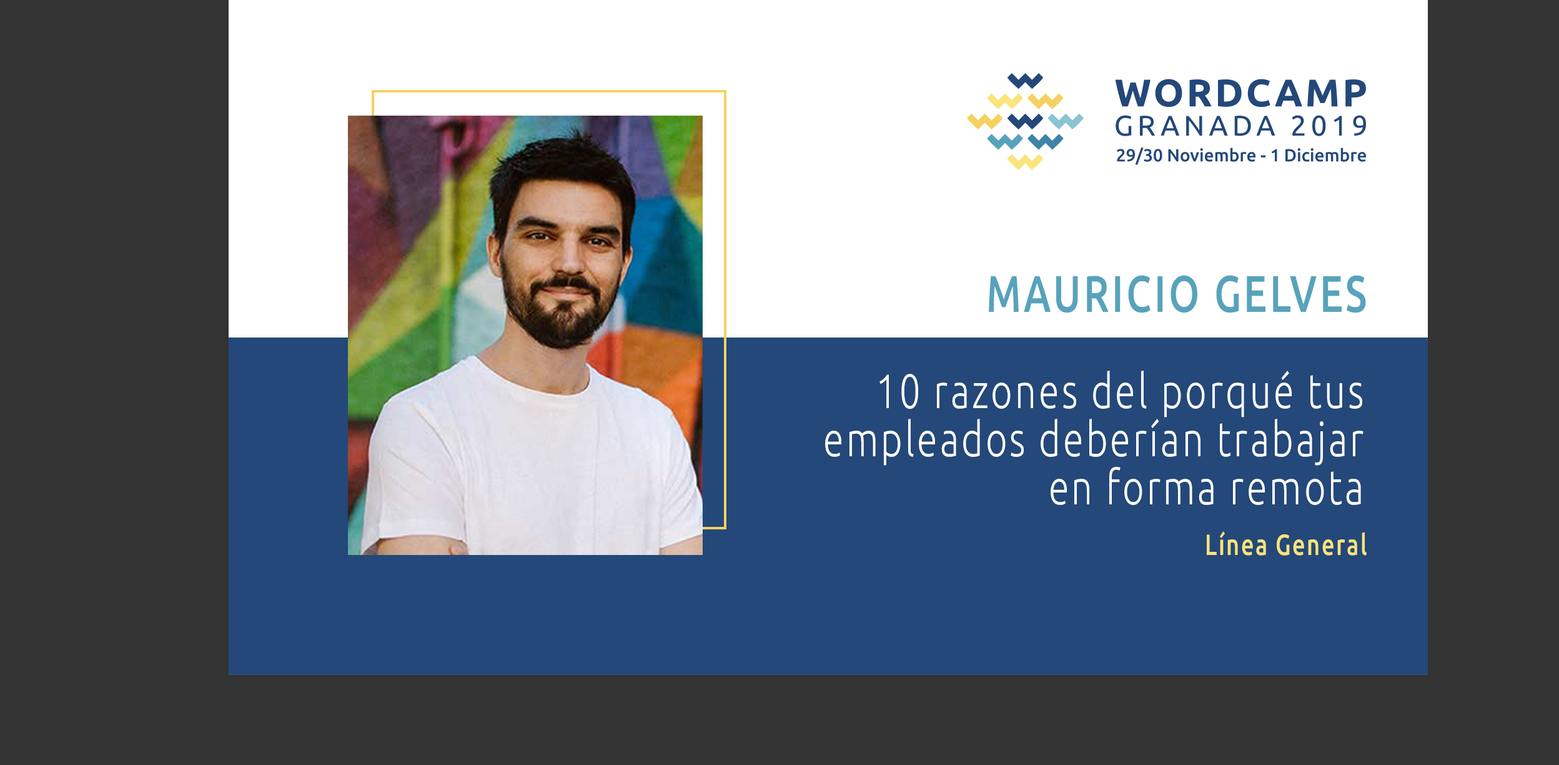
<style>
.page{position:relative;width:1559px;height:765px;background:#333333}
.page>*{position:absolute;margin:0}
.t1{font:51.4px "Ubuntu-Medium";letter-spacing:0.068em;color:#57a3bb;text-transform:uppercase;scale:0.77 1}
.t2{font:48.2px/48.2px "Ubuntu-Light";letter-spacing:0.068em;color:#ffffff;scale:0.77 1}
.t3{font:29.2px "Ubuntu-Medium";letter-spacing:0.068em;color:#f9e37b;scale:0.77 1}
</style>
<div class="page">
<p class="t1" style="left:989px;top:275px;width:377px;height:38px">Mauricio Gelves</p>
<p class="t2" style="left:825px;top:370px;width:539px;height:135px;text-align:right">10 razones del porqué tus empleados deberían trabajar en forma remota</p>
<p class="t3" style="left:1207px;top:531px;width:160px;height:24px">Línea General</p>
</div>
